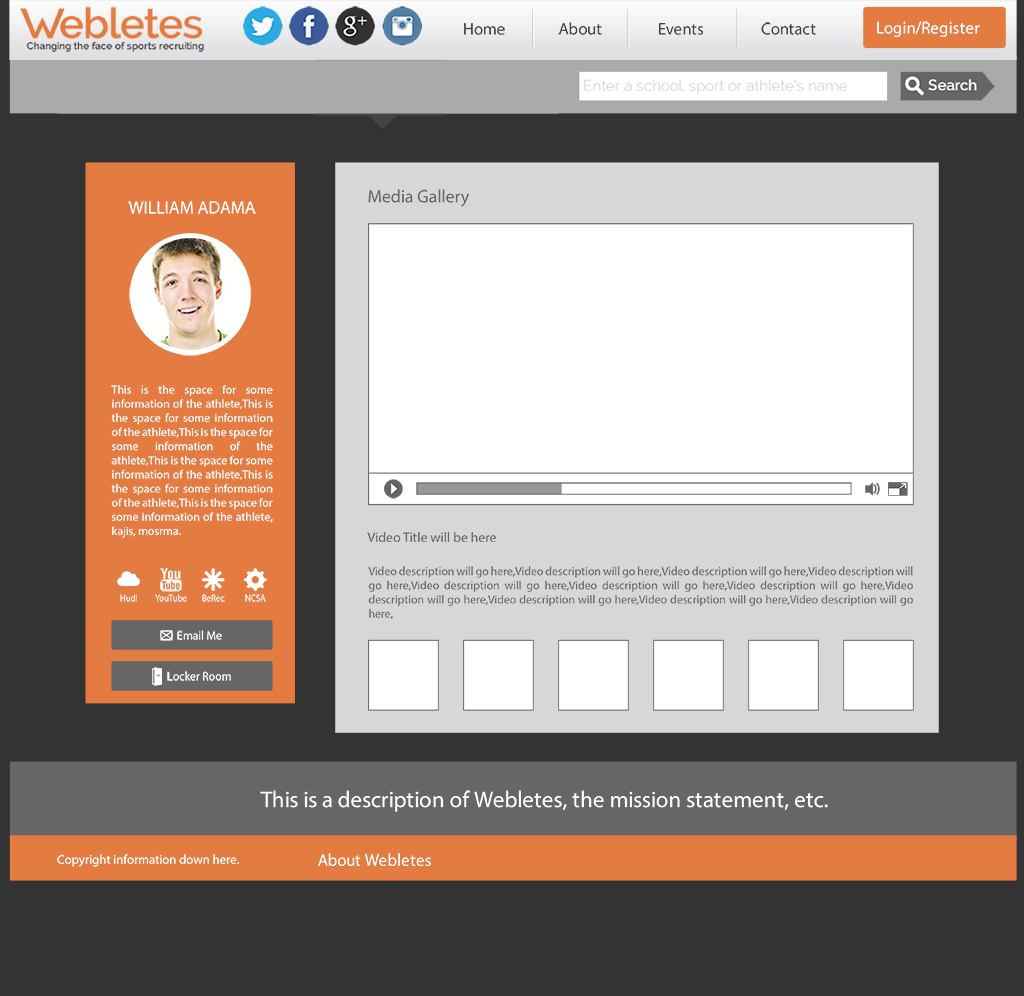
<style>
.page{position:relative;width:1024px;height:996px;background:#333333}
.page>*{position:absolute;margin:0}
.t1{font:16.7px "Raleway";color:#444444}
.t2{font:16.7px "Raleway";color:#ffffff}
.t3{font:17.7px "OpenSans-Semibold";color:#666666}
.t4{font:17.7px "OpenSans-Semibold";color:#ffffff}
.t5{font:11.8px "OpenSans-Light";color:#ffffff}
.t6{font:13.7px "OpenSans-Semibold";color:#666666}
.t7{font:11.8px "OpenSans-Light";color:#666666}
.t8{font:8.8px "OpenSans-Light";color:#ffffff}
.t9{font:8.8px "OpenSans-Light"}
.t10{font:22.6px "OpenSans";color:#ffffff}
.t11{font:12.8px "OpenSans";color:#ffffff}
</style>
<div class="page">
<p class="t1" style="left:464px;top:23px;width:41px;height:12px">Home</p>
<p class="t1" style="left:558px;top:22px;width:44px;height:13px">About</p>
<p class="t1" style="left:659px;top:23px;width:44px;height:12px">Events</p>
<p class="t1" style="left:761px;top:22px;width:55px;height:13px">Contact</p>
<p class="t2" style="left:877px;top:21px;width:103px;height:16px">Login/Register</p>
<p class="t3" style="left:368px;top:189px;width:101px;height:18px">Media Gallery</p>
<p class="t4" style="left:128px;top:201px;width:128px;height:13px">WILLIAM ADAMA</p>
<p class="t5" style="left:111px;top:385px;width:162px;height:153px;text-align:justify">This is the space for some information of the athlete,This is the space for some information of the athlete,This is the space for some information of the athlete,This is the space for some information of the athlete,This is the space for some information of the athlete,This is the space for some information of the athlete, kajis, mosrma.</p>
<p class="t6" style="left:367px;top:532px;width:129px;height:10px">Video Title will be here</p>
<p class="t7" style="left:368px;top:566px;width:545px;height:53px;text-align:justify">Video description will go here,Video description will go here,Video description will go here,Video description will go here,Video description will go here,Video description will go here,Video description will go here,Video description will go here,Video description will go here,Video description will go here,Video description will go here,</p>
<p class="t8" style="left:120px;top:594px;width:17px;height:8px">Hudl</p>
<p class="t8" style="left:155px;top:594px;width:32px;height:8px">YouTube</p>
<p class="t9" style="left:202px;top:594px;width:23px;height:8px">BeRec</p>
<p class="t8" style="left:245px;top:594px;width:21px;height:8px">NCSA</p>
<p class="t5" style="left:177px;top:630px;width:45px;height:10px">Email Me</p>
<p class="t5" style="left:167px;top:671px;width:64px;height:10px">Locker Room</p>
<p class="t10" style="left:260px;top:790px;width:568px;height:22px">This is a description of Webletes, the mission statement, etc.</p>
<p class="t11" style="left:57px;top:854px;width:182px;height:13px">Copyright information down here.</p>
<p class="t2" style="left:318px;top:853px;width:113px;height:13px">About Webletes</p>
</div>
